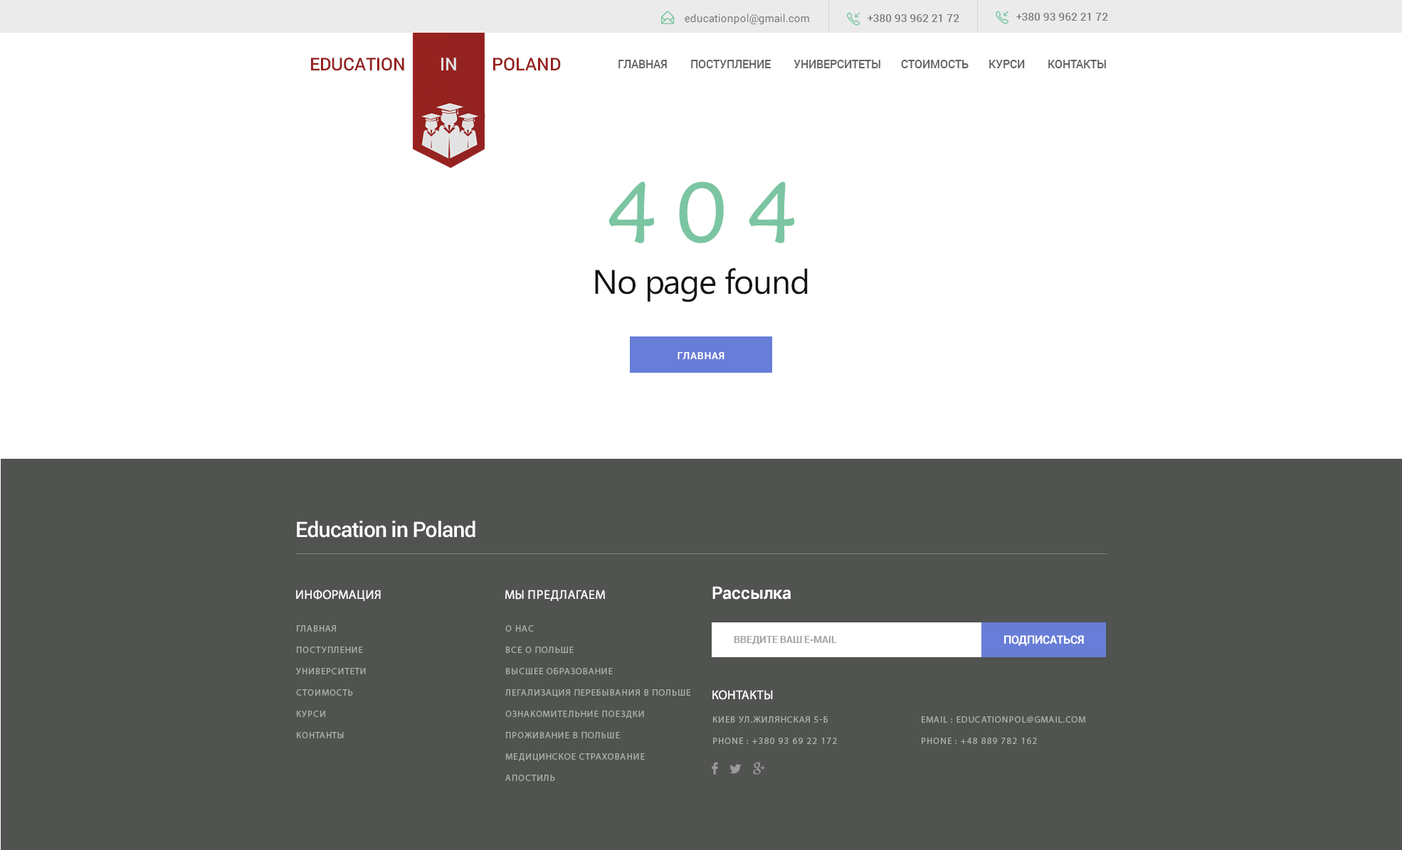
<style>
.page{position:relative;width:1402px;height:850px;background:#ffffff}
.page>*{position:absolute;margin:0}
.t1{font:10.7px "Roboto-Regular";color:#797b7a}
.t2{font:10px "MyriadPro-Regular";color:#797b7a}
.t3{font:10.7px "Roboto-Medium";letter-spacing:-0.01em;color:#797b7a;text-transform:uppercase}
.t4{font:17.8px "Roboto-Medium";color:#942221;text-transform:uppercase}
.t5{font:17.8px "Roboto-Medium";color:#e2e2e2;text-transform:uppercase}
.t6{font:17.8px "Roboto-Medium";color:#97221f;text-transform:uppercase}
.t7{font:11.4px "Roboto-Medium";color:#636363;text-transform:uppercase}
.t8{font:85.4px "MaiandraGD-Regular";letter-spacing:-0.025em;color:#7bc5a2;text-transform:uppercase}
.t9{font:34.2px "NirmalaUI";letter-spacing:-0.025em;color:#131314}
.t10{font:10px "Roboto-Bold";letter-spacing:0.05em;color:#ffffff;text-transform:uppercase}
.t11{font:21.4px "Roboto-Medium";letter-spacing:-0.025em;color:#ffffff}
.t12{font:12.8px "MyriadPro-Regular";letter-spacing:0.025em;color:#ffffff;text-transform:uppercase}
.t13{font:17.1px "Roboto-Medium";color:#ffffff}
.t14{font:9.3px/21.4px "MyriadPro-Regular";letter-spacing:0.075em;color:#aeb0ab;text-transform:uppercase}
.t15{font:10px "Roboto-Bold";color:#a6a6a6}
.t16{font:11.4px "Roboto-Bold";color:#ffffff}
</style>
<div class="page">
<p class="t1" style="left:685px;top:14px;width:124px;height:11px"><span class="t2"> </span>educationpol@gmail.com</p>
<p class="t3" style="left:868px;top:14px;width:91px;height:8px">+380 93 962 21 72</p>
<p class="t3" style="left:1016px;top:13px;width:92px;height:8px">+380 93 962 21 72</p>
<p class="t4" style="left:311px;top:58px;width:250px;height:13px">Education        <span class="t5">in        </span><span class="t6">POland</span></p>
<p class="t7" style="left:618px;top:60px;width:488px;height:8px">Главная        Поступление        Университеты       стоимость       курси        контакты</p>
<p class="t8" style="left:609px;top:181px;width:186px;height:62px">4 0 4</p>
<p class="t9" style="left:595px;top:268px;width:213px;height:34px">No page found</p>
<p class="t10" style="left:678px;top:352px;width:47px;height:7px">Главная</p>
<p class="t11" style="left:297px;top:521px;width:178px;height:17px">Education in Poland</p>
<p class="t12" style="left:296px;top:590px;width:85px;height:11px">ИНФОРМАЦИЯ</p>
<p class="t12" style="left:505px;top:590px;width:100px;height:11px">МЫ ПРЕДЛАГАЕМ</p>
<p class="t13" style="left:712px;top:586px;width:79px;height:14px">Рассылка</p>
<p class="t14" style="left:296px;top:626px;width:70px;height:113px">Главная<br>Поступление<br>Университети<br>стоимость<br>курси<br>контанты</p>
<p class="t14" style="left:505px;top:626px;width:186px;height:155px">о нас<br>все о польше<br>высшее образование<br>легализация перебывания в польше<br>ознакомительние поездки<br>проживание в польше<br>медицинское страхование<br>апостиль</p>
<p class="t15" style="left:734px;top:636px;width:103px;height:9px">ВВЕДИТЕ ВАШ E-MAIL</p>
<p class="t16" style="left:1004px;top:636px;width:80px;height:10px">ПОДПИСАТЬСЯ</p>
<p class="t12" style="left:712px;top:690px;width:61px;height:10px">КОНТАКТЫ</p>
<p class="t14" style="left:713px;top:717px;width:124px;height:27px">Киев ул.жилянская 5-б<br>Phone : +380 93 69 22 172</p>
<p class="t14" style="left:922px;top:717px;width:163px;height:27px">Email : educationpol@gmail.com<br>Phone : +48 889 782 162</p>
</div>
